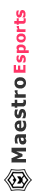
<style>
.page{position:relative;width:40px;height:191px;background:#ffffff}
.page>*{position:absolute;margin:0}
.t1{font:16px "Tahoma-Bold";letter-spacing:0.045em;color:#ff3466}
.t2{font:20px "Tahoma-Bold";letter-spacing:0.045em;color:#333333}
</style>
<div class="page">
<p class="t1" style="left:13px;top:10px;width:16px;height:63px;rotate:-90deg">Esports</p>
<p class="t2" style="left:11px;top:77px;width:16px;height:86px;rotate:-90deg">Maestro</p>
</div>
